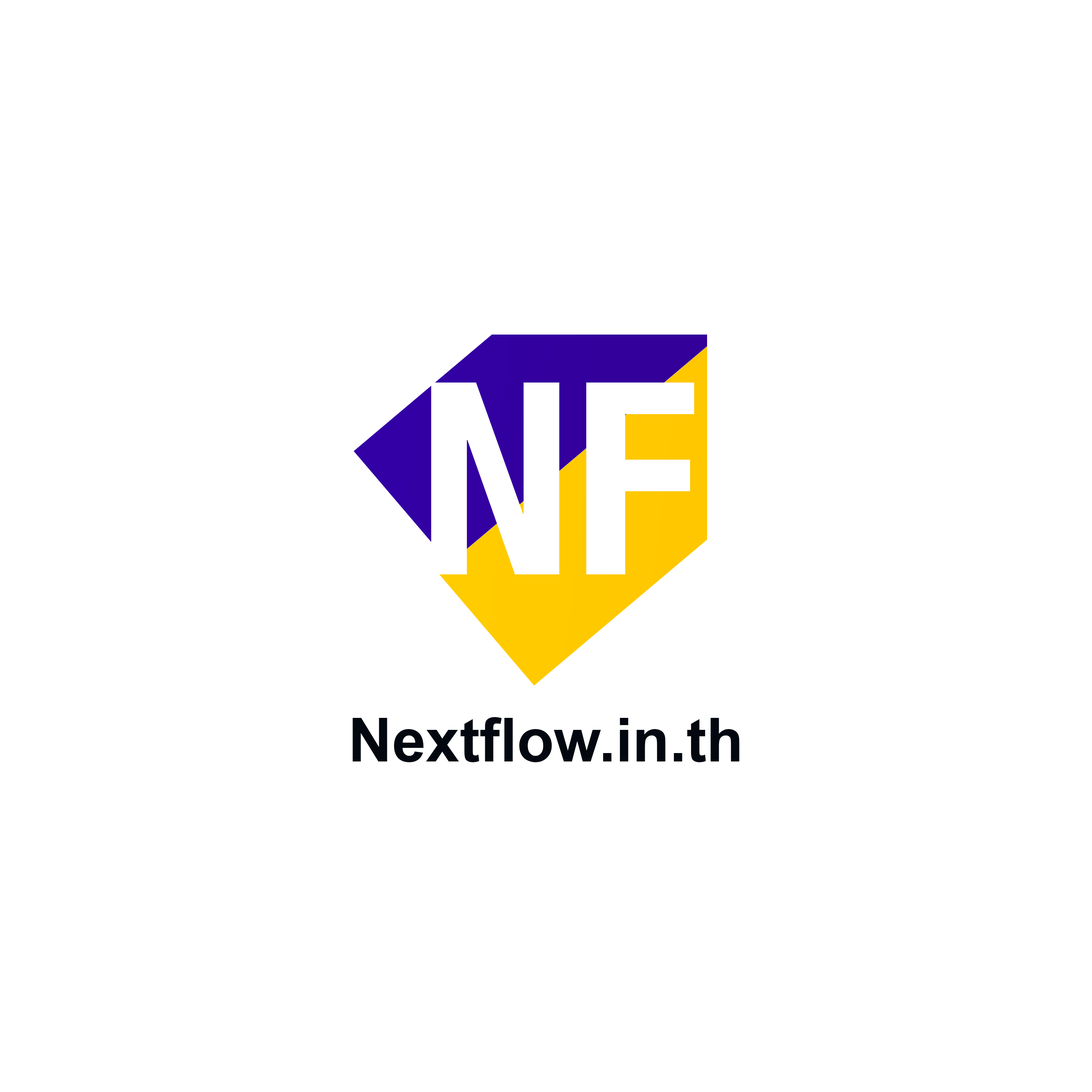
<style>
.page{position:relative;width:1092px;height:1092px;background:#ffffff}
.page>*{position:absolute;margin:0}
.t1{font:60.6px "Arial-BoldMT";color:#020710}
</style>
<div class="page">
<p class="t1" style="left:353px;top:717px;width:386px;height:45px">Nextflow.in.th</p>
</div>
